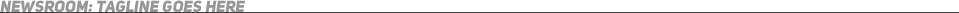
<style>
.page{position:relative;width:959px;height:13px;background:#ffffff}
.page>*{position:absolute;margin:0}
.t1{font:16px "Uni-Sans-Heavy-Italic";color:#969696;text-transform:uppercase}
</style>
<div class="page">
<p class="t1" style="left:0px;top:0px;width:245px;height:13px">NEWSROOM: TAGLINE GOES HERE</p>
</div>
